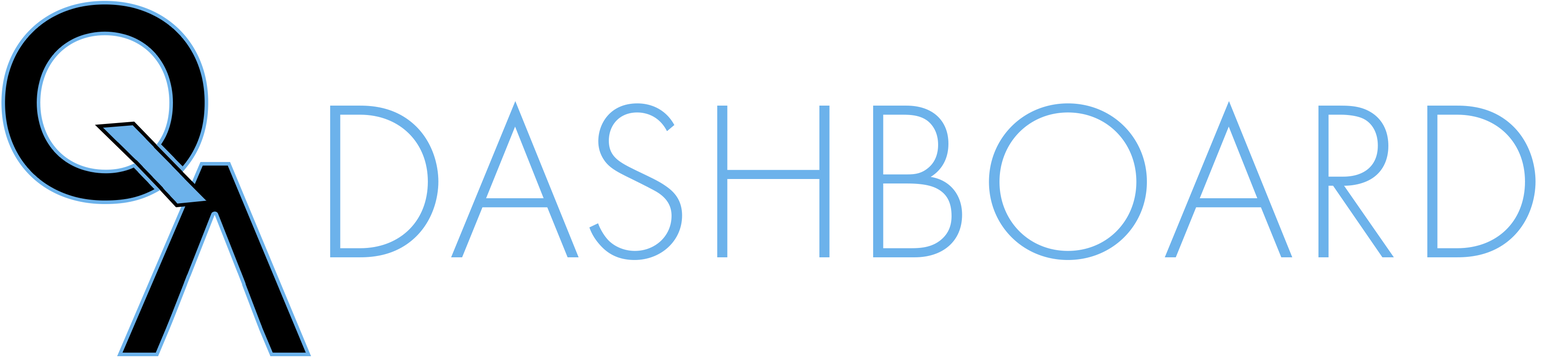
<style>
.page{position:relative;width:1568px;height:358px;background:#ffffff}
.page>*{position:absolute;margin:0}
.t1{font:227.8px "FuturaNewLight-Reg";color:#6cb2eb;text-transform:uppercase}
</style>
<div class="page">
<p class="t1" style="left:330px;top:101px;width:1206px;height:159px">Dashboard</p>
</div>
